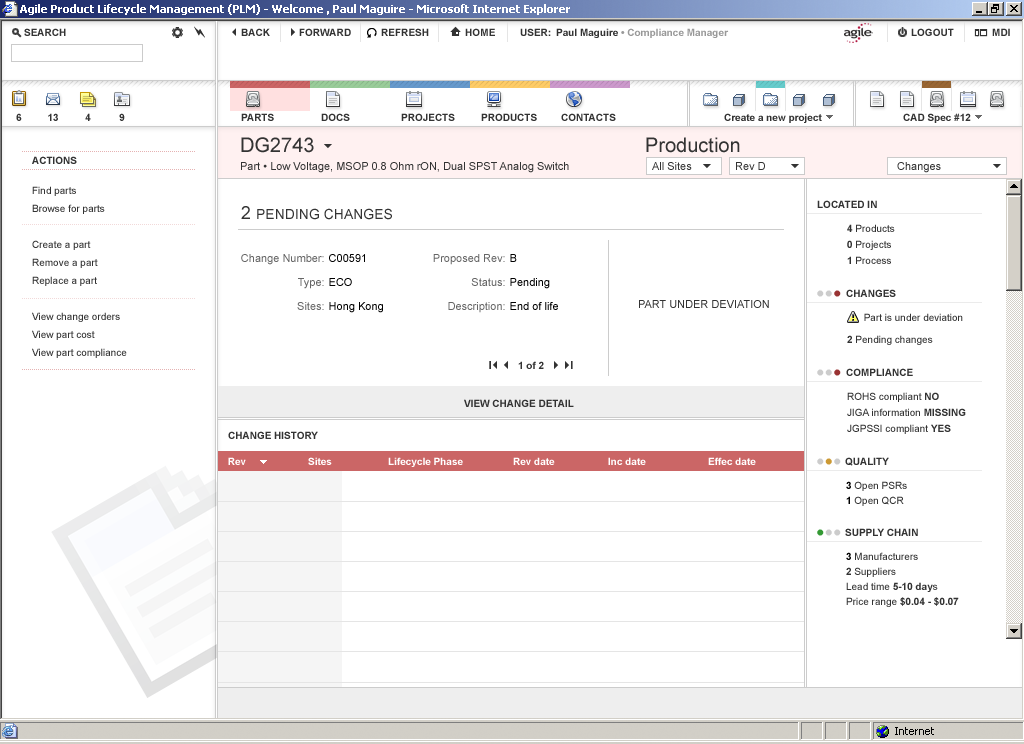
<style>
.page{position:relative;width:1024px;height:744px;background:#ffffff}
.page>*{position:absolute;margin:0}
.t1{font:20px "ArialMT";color:#333333}
.t2{font:10px "Arial-BoldMT";color:#333333}
.t3{font:11px "ArialMT";color:#333333}
.t4{font:10px/18px "ArialMT";color:#333333}
.t5{font:14px "ArialMT";color:#333333}
.t6{font:18px "ArialMT";color:#333333}
.t7{font:10px/16px "ArialMT";color:#333333}
.t8{font:10px/16px "Arial-BoldMT";color:#333333}
.t9{font:11px/24px "ArialMT";color:#666666}
.t10{font:11px/24px "ArialMT";color:#000000}
.t11{font:24px "ArialMT";color:#cccccc}
.t12{font:24px "ArialMT";color:#993333}
.t13{font:10px "Arial-BoldMT";color:#ffffff}
.t14{font:24px "ArialMT";color:#cc9933}
.t15{font:10px/15px "ArialMT";color:#333333}
.t16{font:10px/15px "Arial-BoldMT";color:#000000}
.t17{font:24px "ArialMT";color:#339933}
.t18{font:10px/15px "Arial-BoldMT";color:#333333}
</style>
<div class="page">
<p class="t1" style="left:241px;top:137px;width:73px;height:16px">DG2743</p>
<p class="t1" style="left:646px;top:137px;width:94px;height:16px">Production</p>
<p class="t2" style="left:32px;top:156px;width:45px;height:8px">ACTIONS</p>
<p class="t3" style="left:241px;top:162px;width:328px;height:11px">Part • Low Voltage, MSOP 0.8 Ohm rON, Dual SPST Analog Switch</p>
<p class="t3" style="left:652px;top:162px;width:40px;height:8px">All Sites</p>
<p class="t3" style="left:736px;top:162px;width:29px;height:8px">Rev D</p>
<p class="t3" style="left:897px;top:162px;width:44px;height:11px">Changes</p>
<p class="t4" style="left:32px;top:186px;width:95px;height:172px">Find parts<br>Browse for parts<br><br>Create a part<br>Remove a part<br>Replace a part<br><br>View change orders<br>View part cost<br>View part compliance</p>
<p class="t5" style="left:241px;top:206px;width:151px;height:14px"><span class="t6">2 </span>PENDING CHANGES</p>
<p class="t2" style="left:817px;top:200px;width:60px;height:8px">LOCATED IN</p>
<p class="t7" style="left:847px;top:224px;width:48px;height:40px"><span class="t8">4</span> Products<br><span class="t8">0</span> Projects<br><span class="t8">1</span> Process</p>
<p class="t9" style="left:241px;top:254px;width:83px;height:56px;text-align:right">Change Number:<br>Type:<br>Sites:</p>
<p class="t10" style="left:329px;top:254px;width:54px;height:59px">C00591<br>ECO<br>Hong Kong</p>
<p class="t9" style="left:433px;top:254px;width:72px;height:59px;text-align:right">Proposed Rev:<br>Status:<br>Description:</p>
<p class="t10" style="left:510px;top:254px;width:48px;height:56px">B<br>Pending<br>End of life</p>
<p class="t11" style="left:817px;top:290px;width:24px;height:7px">••<span class="t12">•</span></p>
<p class="t2" style="left:846px;top:289px;width:50px;height:8px">CHANGES</p>
<p class="t3" style="left:639px;top:300px;width:130px;height:8px">PART UNDER DEVIATION</p>
<p class="t7" style="left:847px;top:313px;width:116px;height:32px">Part is under deviation<br><span class="t8">2 </span>Pending changes</p>
<p class="t2" style="left:518px;top:361px;width:26px;height:8px">1 of 2</p>
<p class="t11" style="left:817px;top:369px;width:24px;height:7px">••<span class="t12">•</span></p>
<p class="t2" style="left:846px;top:368px;width:67px;height:8px">COMPLIANCE</p>
<p class="t2" style="left:464px;top:399px;width:110px;height:8px">VIEW CHANGE DETAIL</p>
<p class="t7" style="left:847px;top:392px;width:119px;height:42px">ROHS compliant <span class="t8">NO<br></span>JIGA information <span class="t8">MISSING<br></span>JGPSSI compliant <span class="t8">YES</span></p>
<p class="t2" style="left:228px;top:431px;width:90px;height:8px">CHANGE HISTORY</p>
<p class="t13" style="left:228px;top:457px;width:18px;height:8px">Rev</p>
<p class="t13" style="left:308px;top:457px;width:24px;height:8px">Sites</p>
<p class="t13" style="left:388px;top:457px;width:75px;height:10px">Lifecycle Phase</p>
<p class="t13" style="left:513px;top:457px;width:42px;height:8px">Rev date</p>
<p class="t13" style="left:608px;top:457px;width:38px;height:8px">Inc date</p>
<p class="t13" style="left:708px;top:457px;width:48px;height:8px">Effec date</p>
<p class="t11" style="left:817px;top:458px;width:24px;height:7px">•<span class="t14">•</span>•</p>
<p class="t2" style="left:845px;top:457px;width:44px;height:9px">QUALITY</p>
<p class="t15" style="left:846px;top:481px;width:61px;height:25px"><span class="t16">3 </span>Open PSRs<br><span class="t16">1 </span>Open QCR</p>
<p class="t11" style="left:817px;top:529px;width:24px;height:7px"><span class="t17">•</span>••</p>
<p class="t2" style="left:845px;top:528px;width:73px;height:8px">SUPPLY CHAIN</p>
<p class="t15" style="left:846px;top:552px;width:113px;height:55px"><span class="t16">3</span> Manufacturers<br><span class="t18">2</span> Suppliers<br>Lead time <span class="t18">5-10 day</span>s<br>Price range <span class="t18">$0.04 - $0.07</span></p>
</div>
